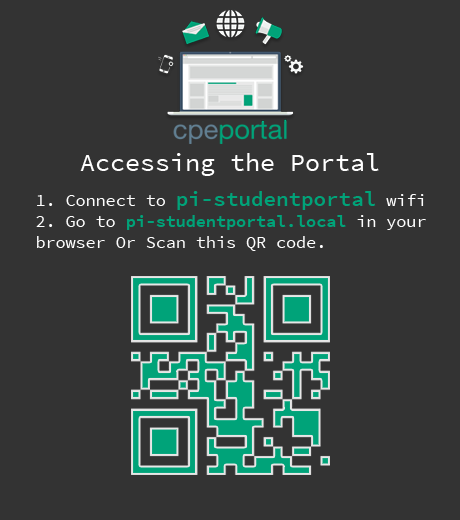
<style>
.page{position:relative;width:460px;height:520px;background:#333333}
.page>*{position:absolute;margin:0}
.t1{font:25px "SourceCodePro-Regular";color:#ffffff}
.t2{font:16.7px/20.9px "SourceCodePro-Regular";color:#ffffff}
.t3{font:20.9px/20.9px "SourceCodePro-Semibold";color:#00a379}
.t4{font:16.7px/20.9px "SourceCodePro-Semibold";color:#00a379}
</style>
<div class="page">
<p class="t1" style="left:80px;top:153px;width:299px;height:23px">Accessing the Portal</p>
<p class="t2" style="left:36px;top:191px;width:390px;height:60px">1. Connect to <span class="t3">pi-studentportal</span> wifi<br>2. Go to <span class="t4">pi-studentportal.local</span> in your browser Or Scan this QR code.</p>
</div>
